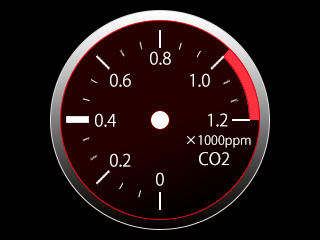
<style>
.page{position:relative;width:320px;height:240px;background:#000000}
.page>*{position:absolute;margin:0}
.t1{font:16.7px "KozGoPr6N-Regular";color:#ffffff}
.t2{font:12.5px "KozGoPr6N-Regular";color:#ffffff}
</style>
<div class="page">
<p class="t1" style="left:150px;top:51px;width:21px;height:14px">0.8</p>
<p class="t1" style="left:110px;top:73px;width:21px;height:14px">0.6</p>
<p class="t1" style="left:190px;top:73px;width:20px;height:14px">1.0</p>
<p class="t1" style="left:95px;top:113px;width:21px;height:14px">0.4</p>
<p class="t1" style="left:208px;top:113px;width:20px;height:14px">1.2</p>
<p class="t2" style="left:187px;top:135px;width:64px;height:13px">×1000ppm</p>
<p class="t1" style="left:110px;top:153px;width:21px;height:14px">0.2</p>
<p class="t1" style="left:199px;top:152px;width:30px;height:14px">CO2</p>
<p class="t1" style="left:156px;top:172px;width:8px;height:14px">0</p>
</div>
